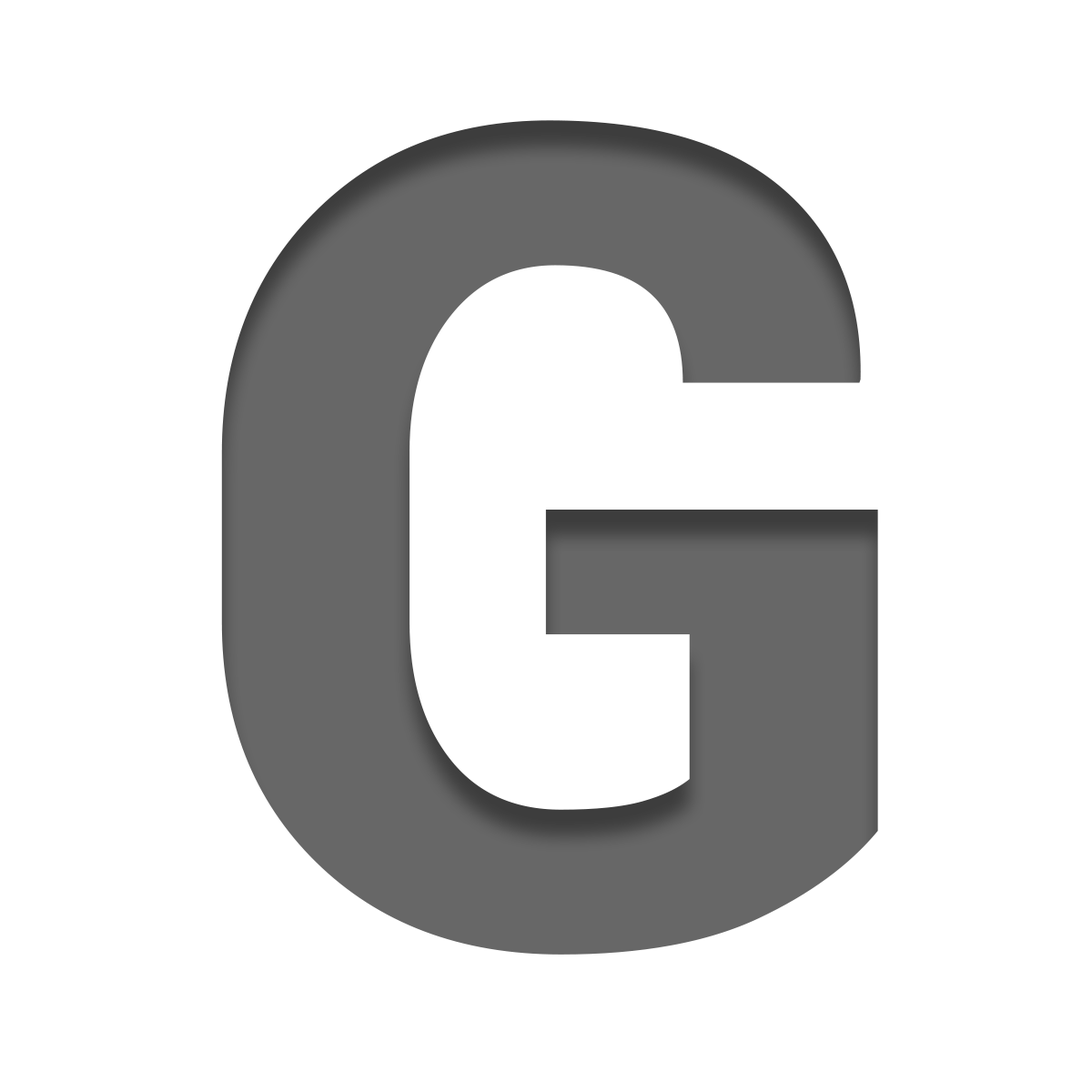
<style>
.page{position:relative;width:1092px;height:1092px;background:#ffffff}
.page>*{position:absolute;margin:0}
.t1{font:1140.2px "Roboto-Black";color:#676767}
</style>
<div class="page">
<p class="t1" style="left:221px;top:120px;width:657px;height:835px">G</p>
</div>
